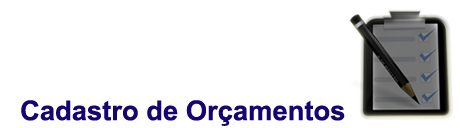
<style>
.page{position:relative;width:460px;height:128px;background:#ffffff}
.page>*{position:absolute;margin:0}
.t1{font:27.4px "Arial-BoldMT";color:#160471}
</style>
<div class="page">
<p class="t1" style="left:21px;top:100px;width:324px;height:26px">Cadastro de Orçamentos</p>
</div>
